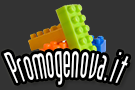
<style>
.page{position:relative;width:135px;height:90px;background:#333333}
.page>*{position:absolute;margin:0}
.t1{font:21.5px "Institution";color:#ffffff;scale:1.15 1}
</style>
<div class="page">
<p class="t1" style="left:3px;top:51px;width:126px;height:34px">Promogenova.it</p>
</div>
